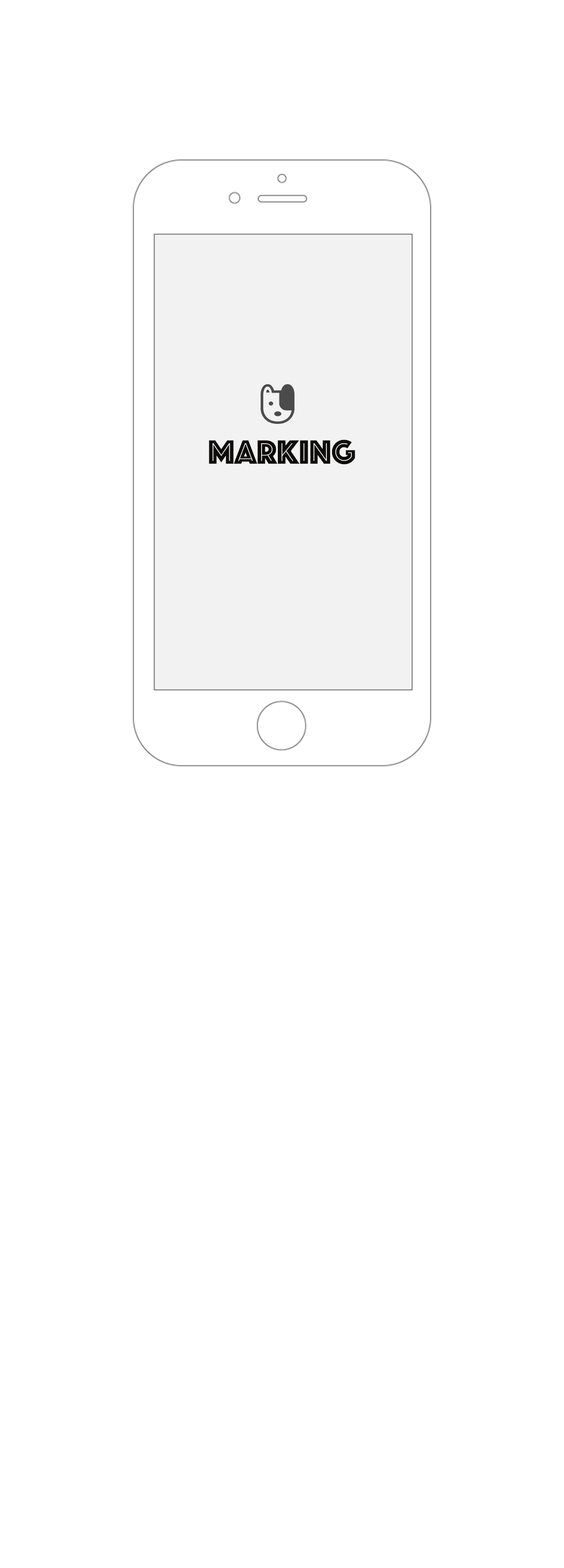
<style>
.page{position:relative;width:564px;height:1568px;background:#ffffff}
.page>*{position:absolute;margin:0}
.t1{font:34.8px "Phosphate-Inline";color:#0d0b08}
</style>
<div class="page">
<p class="t1" style="left:209px;top:440px;width:146px;height:25px">Marking</p>
</div>
